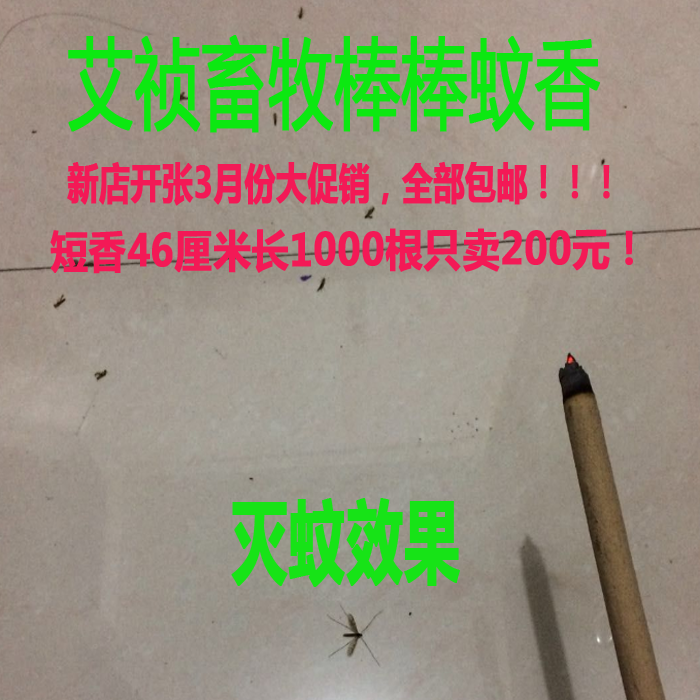
<style>
.page{position:relative;width:700px;height:700px}
.page>*{position:absolute;margin:0}
.t1{font:96.7px "MicrosoftYaHei";color:#0ce811;font-weight:bold;scale:0.67 1}
.t2{font:43.2px "MicrosoftYaHei-Bold";color:#f31956;font-weight:bold;scale:0.71 1}
.t3{font:44.1px "MicrosoftYaHei-Bold";color:#f31956;font-weight:bold;scale:0.85 1}
.t4{font:89.5px "MicrosoftYaHei-Bold";color:#17e317;font-weight:bold;scale:0.62 1}
</style>
<div class="page">
<p class="t1" style="left:68px;top:35px;width:532px;height:98px">艾祯畜牧棒棒蚊香</p>
<p class="t2" style="left:67px;top:162px;width:543px;height:44px">新店开张3月份大促销，全部包邮！！！</p>
<p class="t3" style="left:50px;top:228px;width:583px;height:46px">短香46厘米长1000根只卖200元！</p>
<p class="t4" style="left:231px;top:498px;width:229px;height:89px">灭蚊效果</p>
</div>
